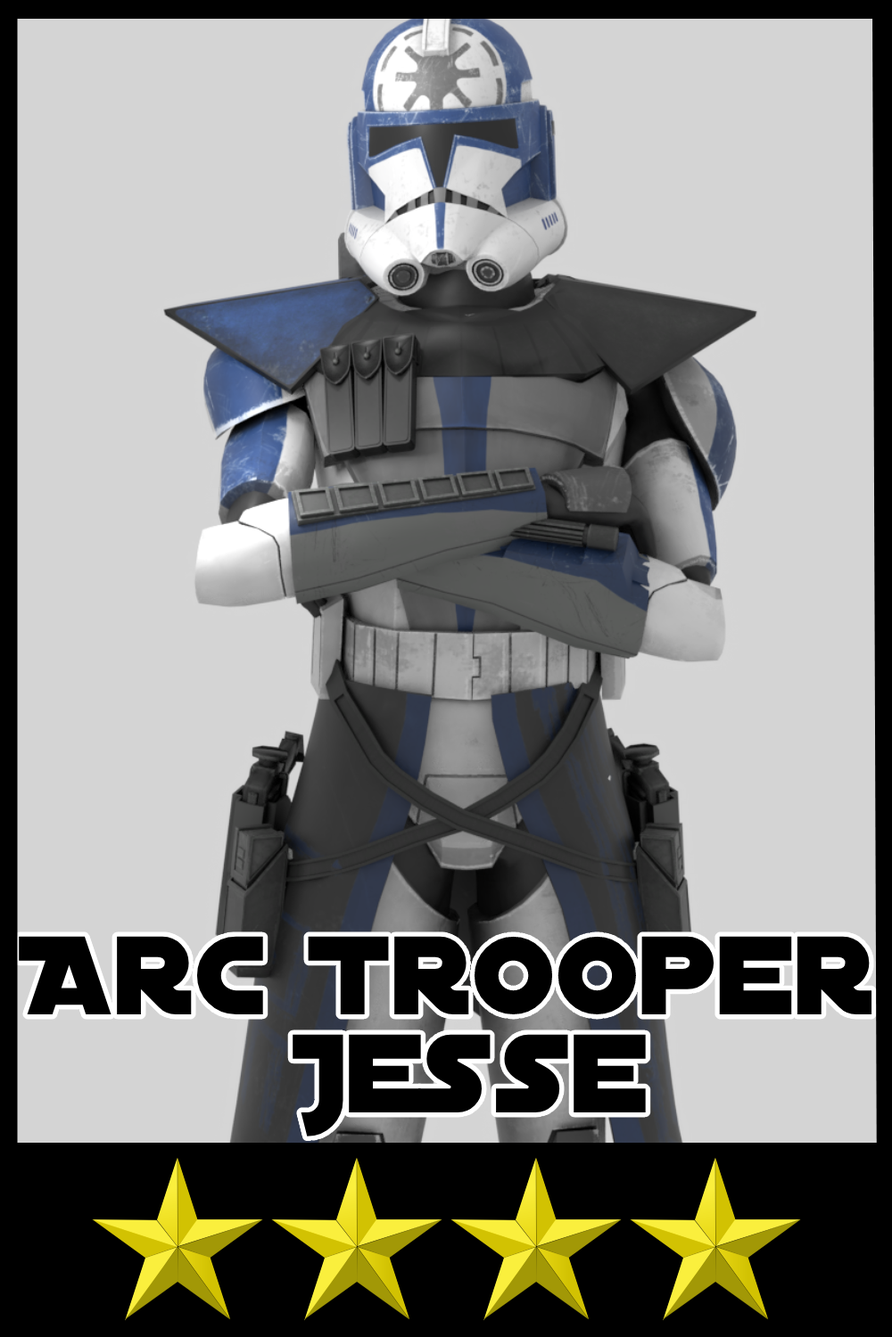
<style>
.page{position:relative;width:892px;height:1337px;background:#d4d4d4}
.page>*{position:absolute;margin:0}
.t1{font:119.5px/98.1px "DistantGalaxy";color:#000000}
</style>
<div class="page">
<p class="t1" style="left:19px;top:936px;width:853px;height:201px;text-align:center">Arc Trooper <br>Jesse</p>
</div>
